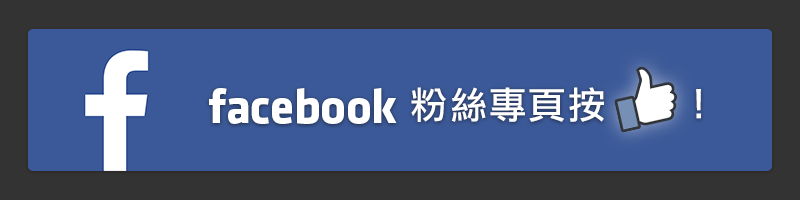
<style>
.page{position:relative;width:800px;height:200px;background:#3b5998}
.page>*{position:absolute;margin:0}
.t1{font:50px "Klavika-Bold";letter-spacing:-0.01em;color:#ffffff}
.t2{font:37.5px "DFLiHei-Md-HK-BF";letter-spacing:0.05em;color:#ffffff}
</style>
<div class="page">
<p class="t1" style="left:209px;top:88px;width:188px;height:36px">facebook</p>
<p class="t2" style="left:411px;top:87px;width:290px;height:35px">粉絲專頁按 　  ！</p>
</div>
